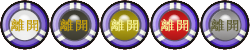
<style>
.page{position:relative;width:250px;height:50px;background:#ffffff}
.page>*{position:absolute;margin:0}
.t1{font:13.1px "STXihei";color:#cba717;font-weight:bold;scale:1.09 1}
.t2{font:13.1px "STXihei";color:#f3ef97;font-weight:bold;scale:1.09 1}
.t3{font:13.1px "STXihei";color:#5f5e35;font-weight:bold;scale:1.09 1}
</style>
<div class="page">
<p class="t1" style="left:11px;top:19px;width:28px;height:13px">離開</p>
<p class="t1" style="left:60px;top:19px;width:28px;height:13px">離開</p>
<p class="t2" style="left:111px;top:19px;width:28px;height:13px">離開</p>
<p class="t2" style="left:161px;top:19px;width:28px;height:13px">離開</p>
<p class="t3" style="left:211px;top:19px;width:28px;height:13px">離開</p>
</div>
